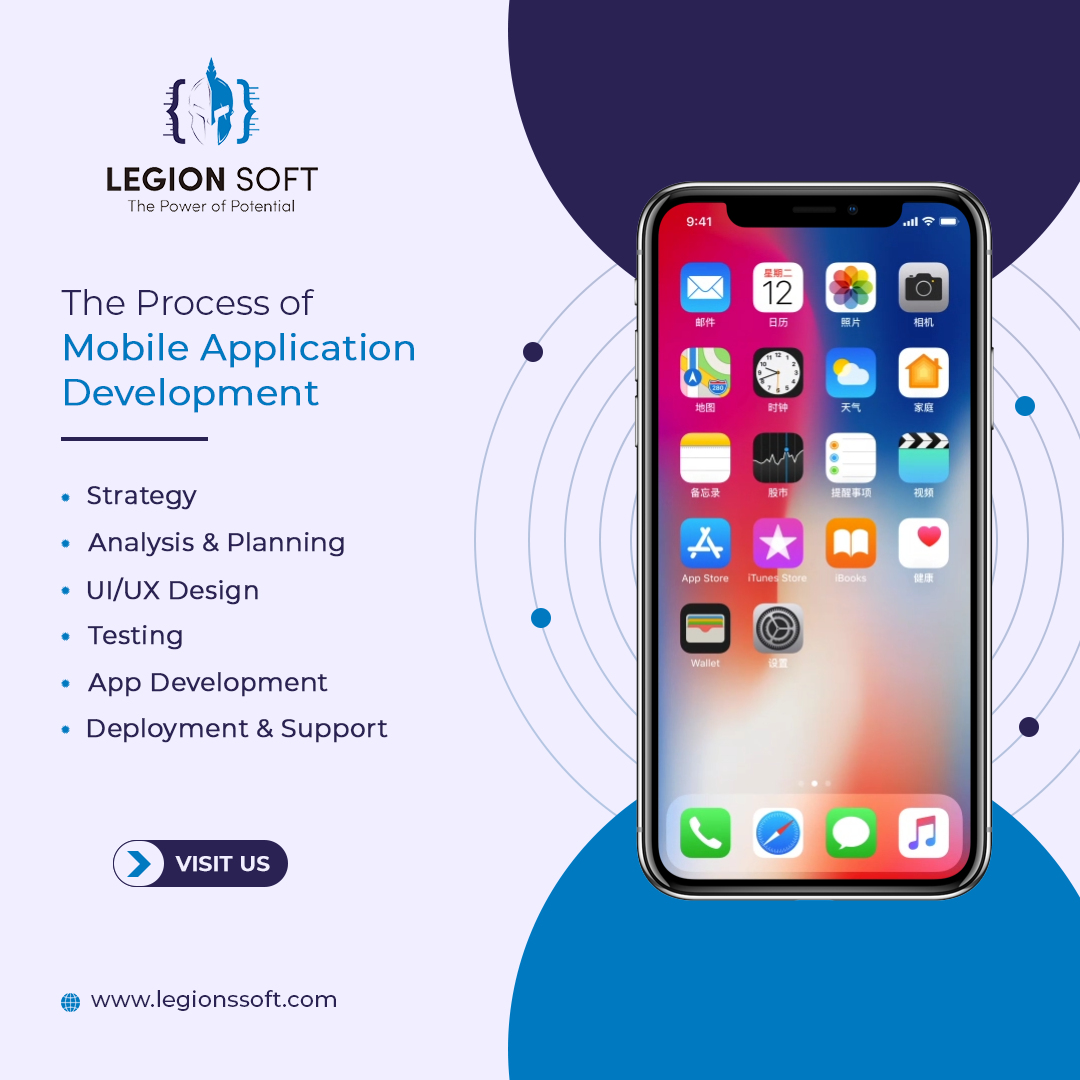
<style>
.page{position:relative;width:1080px;height:1080px;background:#f0eeff}
.page>*{position:absolute;margin:0}
.t1{font:36px/45px "Montserrat-Regular";color:#0079c0;font-weight:bold}
.t2{font:35px/45px "Montserrat-Regular";color:#2a2253}
.t3{font:25px "Montserrat-Regular";color:#2a2253;font-weight:bold}
.t4{font:20.7px "Montserrat-SemiBold";color:#f0eeff;text-transform:uppercase;font-weight:bold}
.t5{font:22px "Montserrat-Medium";letter-spacing:0.015em;color:#2a2253}
</style>
<div class="page">
<p class="t1" style="left:61px;top:289px;width:353px;height:124px"><span class="t2">The Process of<br></span>Mobile Application<br>Development</p>
<p class="t3" style="left:87px;top:486px;width:110px;height:24px">Strategy</p>
<p class="t3" style="left:88px;top:532px;width:256px;height:25px">Analysis &amp; Planning</p>
<p class="t3" style="left:87px;top:577px;width:171px;height:28px">UI/UX Design</p>
<p class="t3" style="left:87px;top:625px;width:95px;height:25px">Testing</p>
<p class="t3" style="left:88px;top:672px;width:240px;height:25px">App Development</p>
<p class="t3" style="left:87px;top:718px;width:301px;height:25px">Deployment &amp; Support</p>
<p class="t4" style="left:175px;top:856px;width:95px;height:16px">Visit Us</p>
<p class="t5" style="left:91px;top:990px;width:245px;height:21px">www.legionssoft.com</p>
</div>
